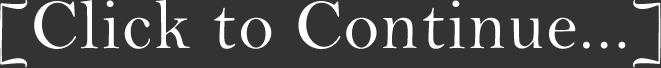
<style>
.page{position:relative;width:661px;height:68px;background:#333333}
.page>*{position:absolute;margin:0}
.t1{font:72px "BellMT";letter-spacing:0.025em;color:#ffffff}
</style>
<div class="page">
<p class="t1" style="left:0px;top:0px;width:661px;height:68px">[Click to Continue...]</p>
</div>
